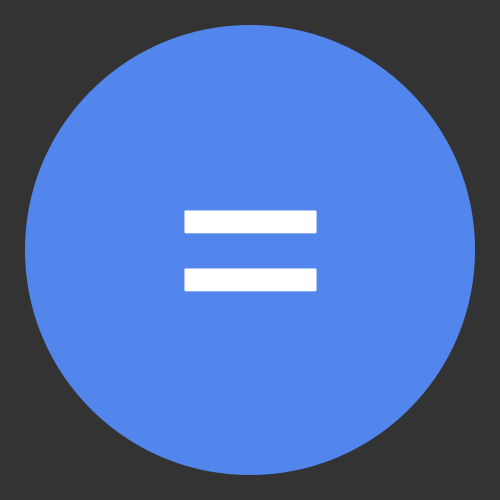
<style>
.page{position:relative;width:500px;height:500px;background:#5286ec}
.page>*{position:absolute;margin:0}
.t1{font:252px "Menlo-Regular";color:#ffffff;font-weight:bold}
</style>
<div class="page">
<p class="t1" style="left:184px;top:210px;width:133px;height:82px">=</p>
</div>
